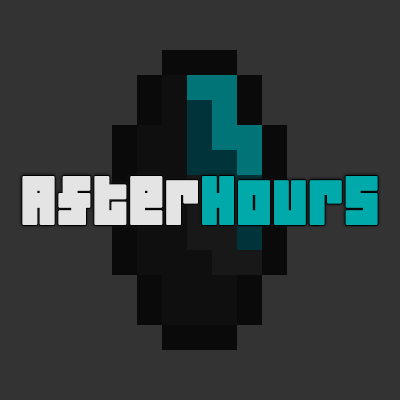
<style>
.page{position:relative;width:400px;height:400px;background:#333333}
.page>*{position:absolute;margin:0}
.t1{font:60px "04b19";color:#e4e4e4;font-weight:bold}
.t2{font:60px "04b19";color:#00aaaa;font-weight:bold}
</style>
<div class="page">
<p class="t1" style="left:22px;top:176px;width:356px;height:49px">After<span class="t2">Hours</span></p>
</div>
